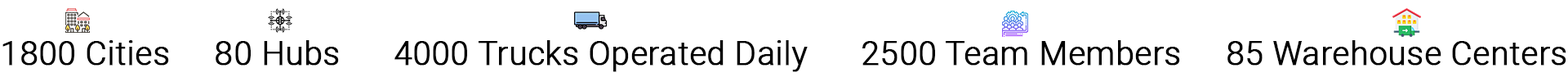
<style>
.page{position:relative;width:1568px;height:82px;background:#ffffff}
.page>*{position:absolute;margin:0}
.t1{font:32.7px "Roboto-Light";color:#000000;font-weight:bold}
</style>
<div class="page">
<p class="t1" style="left:2px;top:40px;width:1564px;height:32px">1800 Cities     80 Hubs      4000 Trucks Operated Daily      2500 Team Members     85 Warehouse Centers</p>
</div>
